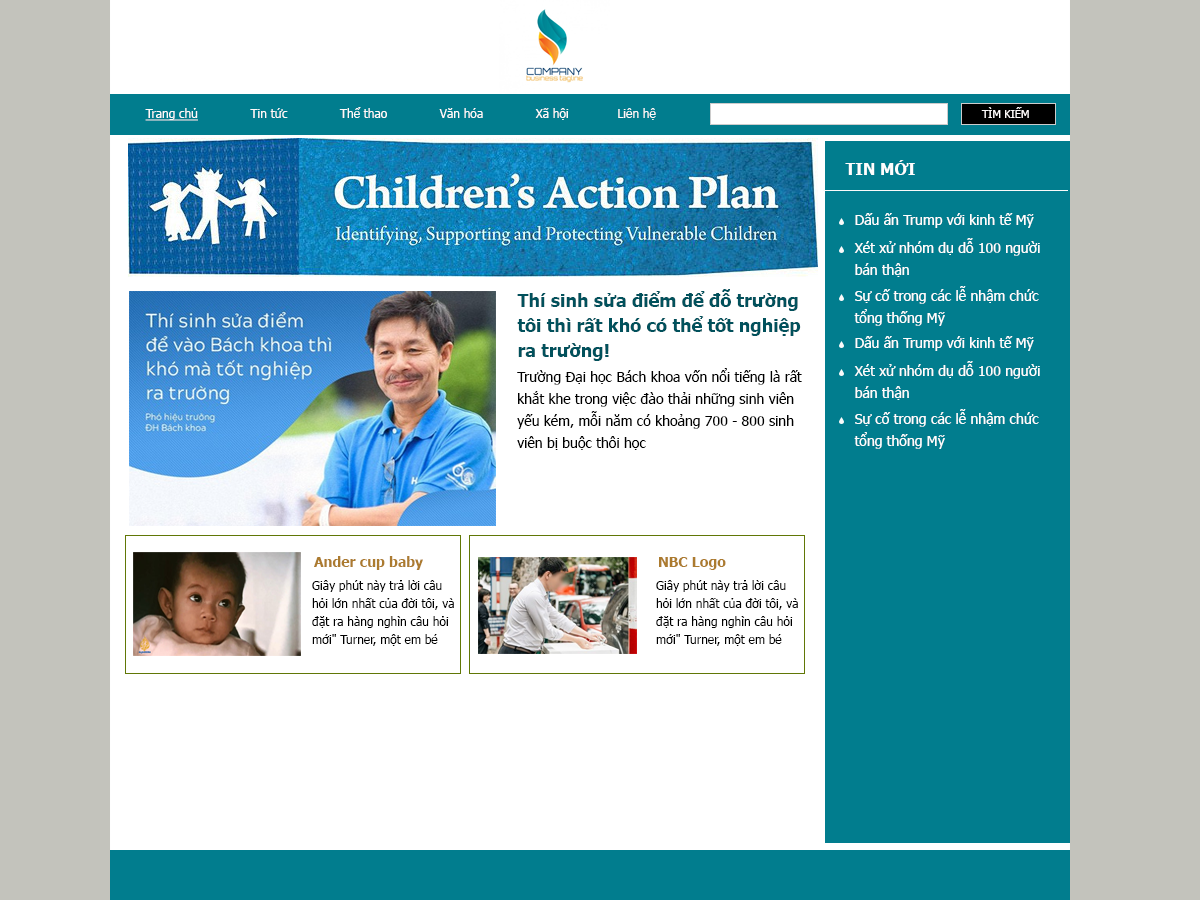
<style>
.page{position:relative;width:1200px;height:900px;background:#ffffff}
.page>*{position:absolute;margin:0}
.t1{font:12px "Tahoma";color:#fefbfb}
.t2{font:12px "Tahoma";color:#fefbfb;text-decoration:underline}
.t3{font:11px "Tahoma";color:#fefbfb}
.t4{font:16px "Tahoma-Bold";color:#fefefe}
.t5{font:14px "Tahoma";color:#fefefe}
.t6{font:14px/22px "Tahoma";color:#fefefe}
.t7{font:18px/25px "Tahoma-Bold";color:#01515c}
.t8{font:14px/22px "Tahoma";color:#000000}
.t9{font:14px "Tahoma-Bold";color:#ac7b2f}
.t10{font:12px/18px "Tahoma";color:#000000}
</style>
<div class="page">
<p class="t1" style="left:145px;top:107px;width:511px;height:14px"><span class="t2">Trang chủ</span>              Tin tức              Thể thao              Văn hóa              Xã hội             Liên hệ</p>
<p class="t3" style="left:981px;top:107px;width:48px;height:11px">TÌM KIẾM</p>
<p class="t4" style="left:845px;top:160px;width:70px;height:15px">TIN MỚI</p>
<p class="t5" style="left:855px;top:213px;width:179px;height:15px">Dấu ấn Trump với kinh tế Mỹ</p>
<p class="t6" style="left:854px;top:238px;width:186px;height:39px">Xét xử nhóm dụ dỗ 100 người <br>bán thận</p>
<p class="t7" style="left:517px;top:289px;width:284px;height:72px">Thí sinh sửa điểm để đỗ trường <br>tôi thì rất khó có thể tốt nghiệp <br>ra trường!</p>
<p class="t6" style="left:854px;top:286px;width:185px;height:40px">Sự cố trong các lễ nhậm chức <br>tổng thống Mỹ</p>
<p class="t5" style="left:855px;top:336px;width:179px;height:15px">Dấu ấn Trump với kinh tế Mỹ</p>
<p class="t6" style="left:854px;top:361px;width:186px;height:39px">Xét xử nhóm dụ dỗ 100 người <br>bán thận</p>
<p class="t8" style="left:517px;top:368px;width:285px;height:82px">Trường Đại học Bách khoa vốn nổi tiếng là rất <br>khắt khe trong việc đào thải những sinh viên <br>yếu kém, mỗi năm có khoảng 700 - 800 sinh <br>viên bị buộc thôi học</p>
<p class="t6" style="left:854px;top:409px;width:185px;height:40px">Sự cố trong các lễ nhậm chức <br>tổng thống Mỹ</p>
<p class="t9" style="left:314px;top:556px;width:109px;height:14px">Ander cup baby</p>
<p class="t9" style="left:659px;top:557px;width:67px;height:13px">NBC Logo</p>
<p class="t10" style="left:312px;top:580px;width:142px;height:66px">Giây phút này trả lời câu <br>hỏi lớn nhất của đời tôi, và <br>đặt ra hàng nghìn câu hỏi <br>mới" Turner, một em bé</p>
<p class="t10" style="left:656px;top:580px;width:142px;height:66px">Giây phút này trả lời câu <br>hỏi lớn nhất của đời tôi, và <br>đặt ra hàng nghìn câu hỏi <br>mới" Turner, một em bé</p>
</div>
